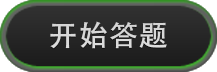
<style>
.page{position:relative;width:217px;height:72px}
.page>*{position:absolute;margin:0}
.t1{font:28.8px "AdobeHeitiStd-Regular";letter-spacing:0.05em;color:#d9d9d9}
</style>
<div class="page">
<p class="t1" style="left:50px;top:21px;width:117px;height:28px">开始答题</p>
</div>
